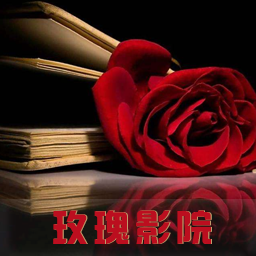
<style>
.page{position:relative;width:256px;height:256px}
.page>*{position:absolute;margin:0}
.t1{font:36px "hzgb";letter-spacing:0.15em;color:#c30013}
.t2{font:36px "hzgb";letter-spacing:0.15em;color:#bc0e1f}
</style>
<div class="page">
<p class="t1" style="left:53px;top:210px;width:158px;height:34px">玫瑰影院</p>
<p class="t2" style="left:54px;top:210px;width:158px;height:34px">玫瑰影院</p>
</div>
